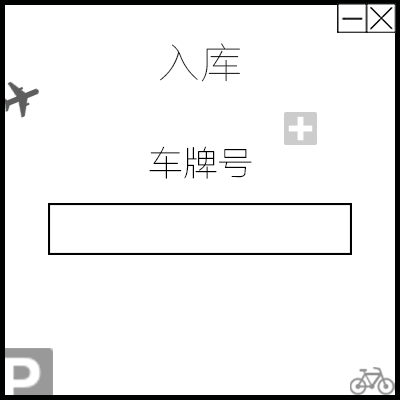
<style>
.page{position:relative;width:400px;height:400px;background:#ffffff}
.page>*{position:absolute;margin:0}
.t1{font:41.7px "FZLTCXHJW--GB1-0";color:#000000}
.t2{font:34.8px "FZLTCXHJW--GB1-0";color:#000000}
</style>
<div class="page">
<p class="t1" style="left:160px;top:43px;width:80px;height:39px">入库</p>
<p class="t2" style="left:149px;top:146px;width:103px;height:33px">车牌号</p>
</div>
